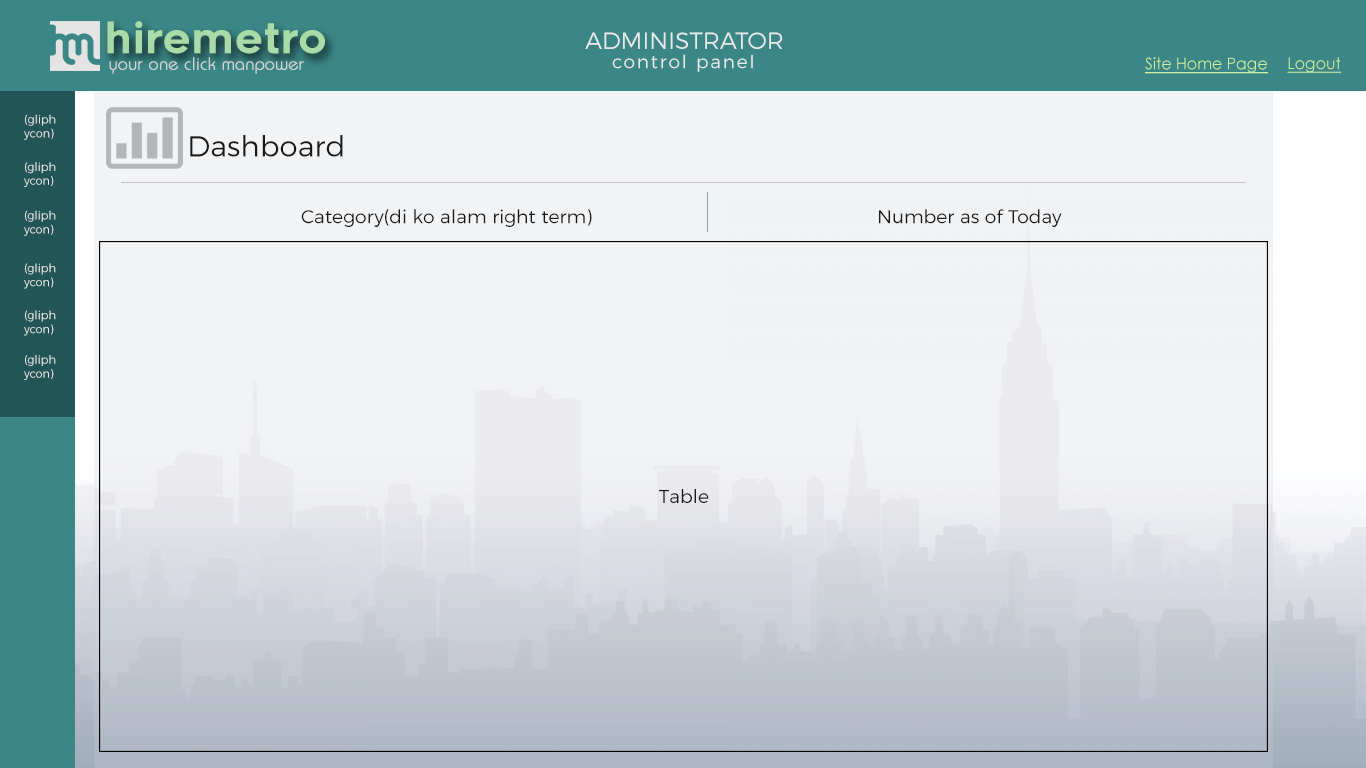
<style>
.page{position:relative;width:1366px;height:768px;background:#f2f3f5}
.page>*{position:absolute;margin:0}
.t1{font:42.1px "Renogare-Regular";color:#a8dba8}
.t2{font:23.6px "Montserrat-Light";color:#ebebeb}
.t3{font:18.4px "Montserrat-Light";letter-spacing:0.1em;color:#ebebeb}
.t4{font:17.5px "Brie-Light";color:#d5d5d5;font-weight:bold}
.t5{font:16.1px "CenturyGothic";color:#cff09e;text-decoration:underline}
.t6{font:11.5px "Montserrat-Light";color:#ebebeb}
.t7{font:28.9px "Montserrat-Light";color:#171717}
.t8{font:18.8px "Montserrat-Light";color:#171717}
</style>
<div class="page">
<p class="t1" style="left:107px;top:21px;width:218px;height:33px">hiremetro</p>
<p class="t2" style="left:585px;top:32px;width:198px;height:17px">ADMINISTRATOR</p>
<p class="t3" style="left:612px;top:54px;width:141px;height:18px">control panel</p>
<p class="t4" style="left:109px;top:57px;width:195px;height:17px">your one click manpower</p>
<p class="t5" style="left:1145px;top:57px;width:123px;height:17px">Site Home Page</p>
<p class="t5" style="left:1287px;top:57px;width:54px;height:16px">Logout</p>
<p class="t6" style="left:24px;top:114px;width:32px;height:26px">(gliph<br>ycon)</p>
<p class="t7" style="left:190px;top:135px;width:153px;height:22px">Dashboard</p>
<p class="t6" style="left:24px;top:162px;width:32px;height:25px">(gliph<br>ycon)</p>
<p class="t8" style="left:301px;top:209px;width:761px;height:18px">Category(di ko alam right term)        Number as of Today</p>
<p class="t6" style="left:24px;top:210px;width:32px;height:26px">(gliph<br>ycon)</p>
<p class="t6" style="left:24px;top:263px;width:32px;height:26px">(gliph<br>ycon)</p>
<p class="t6" style="left:24px;top:310px;width:32px;height:26px">(gliph<br>ycon)</p>
<p class="t6" style="left:24px;top:355px;width:32px;height:25px">(gliph<br>ycon)</p>
<p class="t8" style="left:659px;top:489px;width:50px;height:14px">Table</p>
</div>
